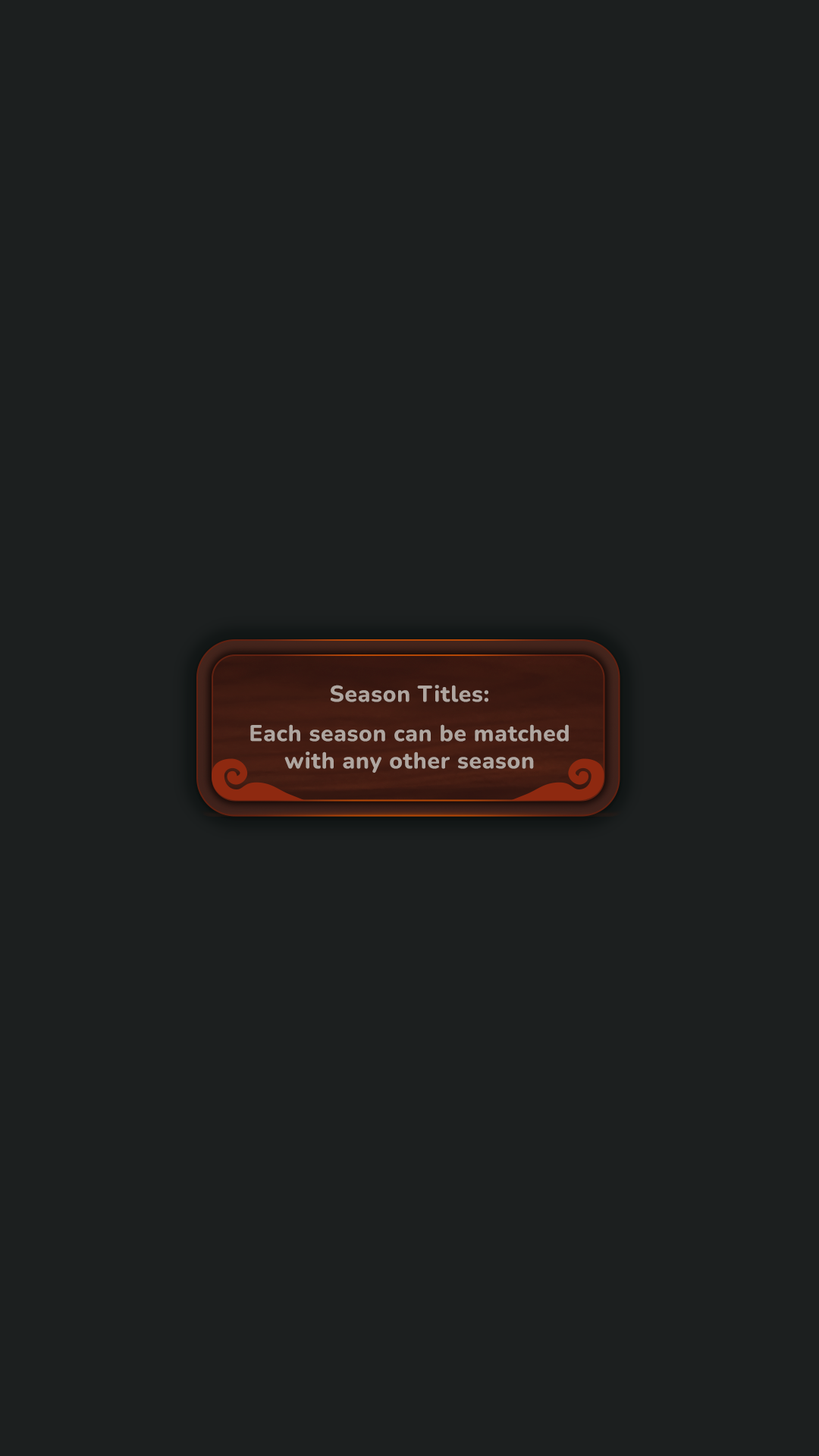
<style>
.page{position:relative;width:819px;height:1456px;background:#1c1f1f}
.page>*{position:absolute;margin:0}
.t1{font:22.7px "Nunito-ExtraBold";letter-spacing:0.025em;color:#afa6a0}
</style>
<div class="page">
<p class="t1" style="left:331px;top:685px;width:157px;height:17px">Season Titles:</p>
<p class="t1" style="left:250px;top:724px;width:319px;height:49px;text-align:center">Each season can be matched<br>with any other season</p>
</div>
